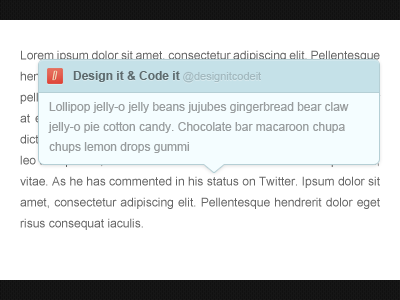
<style>
.page{position:relative;width:400px;height:300px;background:#ffffff}
.page>*{position:absolute;margin:0}
.t1{font:12px/21px "ArialMT"}
.t2{font:12px "Arial-BoldMT";color:#5d6b6e}
.t3{font:11px "ArialMT";color:#a3bac0}
.t4{font:12px/20px "ArialMT";color:#989c9d}
</style>
<div class="page">
<p class="t1" style="left:20px;top:50px;width:361px;height:180px;text-align:justify">Lorem ipsum dolor sit amet, consectetur adipiscing elit. Pellentesque hendrerit dolor eget risus consequat iaculis. Nullam fringilla justo pellentesque nibh mollis pretium interdum ac ligula. Nunc nec dolor at est sollicitudin scelerisque vitae non lectus. Vestibulum ultrices dictum semper. Vivamus rhoncus, libero non viverra euismod, turpis leo tristique leo, vitae iaculis lectus purus vel ante. Nulla et purus mi, vitae. As he has commented in his status on Twitter. Ipsum dolor sit amet, consectetur adipiscing elit. Pellentesque hendrerit dolor eget risus consequat iaculis.</p>
<p class="t2" style="left:73px;top:71px;width:188px;height:12px">Design it &amp; Code it <span class="t3">@designitcodeit</span></p>
<p class="t4" style="left:48px;top:102px;width:301px;height:51px">Lollipop jelly-o jelly beans jujubes gingerbread bear claw jelly-o pie cotton candy. Chocolate bar macaroon chupa chups lemon drops gummi</p>
</div>
